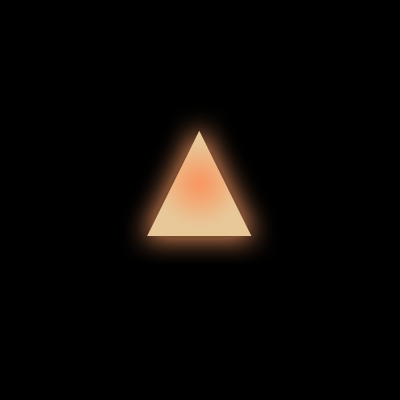
<style>
.page{position:relative;width:400px;height:400px;background:#000000}
.page>*{position:absolute;margin:0}
.t1{font:150px "TimesNewRomanPSMT";color:#e8c798}
</style>
<div class="page">
<p class="t1" style="left:147px;top:131px;width:105px;height:105px">▲</p>
</div>
